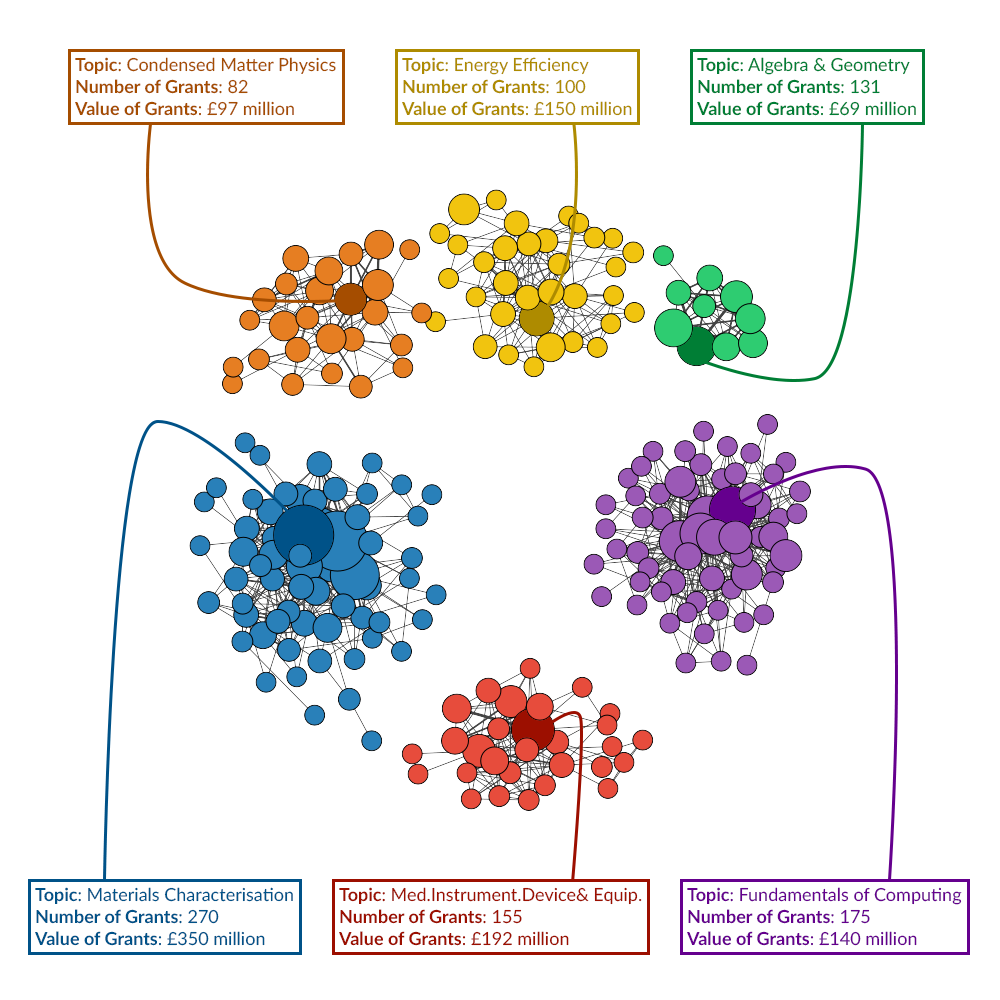
<style>
.page{position:relative;width:1000px;height:1000px;background:#ffffff}
.page>*{position:absolute;margin:0}
.t1{font:18px "Lato-Regular";color:#a54d00}
.t2{font:18px "Lato-Bold";color:#a54d00}
.t3{font:18px "Lato-Regular";color:#ae8b00}
.t4{font:18px "Lato-Bold";color:#ae8b00}
.t5{font:18px "Lato-Regular";color:#007e35}
.t6{font:18px "Lato-Bold";color:#007e35}
.t7{font:18px "Lato-Regular";color:#005288}
.t8{font:18px "Lato-Bold";color:#005288}
.t9{font:18px "Lato-Regular";color:#9c0f00}
.t10{font:18px "Lato-Bold";color:#9c0f00}
.t11{font:18px "Lato-Regular";color:#65008e}
.t12{font:18px "Lato-Bold";color:#65008e}
</style>
<div class="page">
<p class="t1" style="left:75px;top:57px;width:261px;height:59px"><span class="t2">Topic</span>: Condensed Matter Physics<br><span class="t2">Number of Grants</span>: 82<br><span class="t2">Value of Grants</span>: £97 million</p>
<p class="t3" style="left:402px;top:57px;width:230px;height:59px"><span class="t4">Topic</span>: Energy Efficiency<br><span class="t4">Number of Grants</span>: 100<br><span class="t4">Value of Grants</span>: £150 million</p>
<p class="t5" style="left:697px;top:57px;width:219px;height:59px"><span class="t6">Topic</span>: Algebra &amp; Geometry<br><span class="t6">Number of Grants</span>: 131<br><span class="t6">Value of Grants</span>: £69 million</p>
<p class="t7" style="left:35px;top:887px;width:258px;height:59px"><span class="t8">Topic</span>: Materials Characterisation<br><span class="t8">Number of Grants</span>: 270<br><span class="t8">Value of Grants</span>: £350 million</p>
<p class="t9" style="left:339px;top:887px;width:303px;height:59px"><span class="t10">Topic</span>: Med.Instrument.Device&amp; Equip.<br><span class="t10">Number of Grants</span>: 155<br><span class="t10">Value of Grants</span>: £192 million</p>
<p class="t11" style="left:687px;top:887px;width:275px;height:59px"><span class="t12">Topic</span>: Fundamentals of Computing<br><span class="t12">Number of Grants</span>: 175<br><span class="t12">Value of Grants</span>: £140 million</p>
</div>
